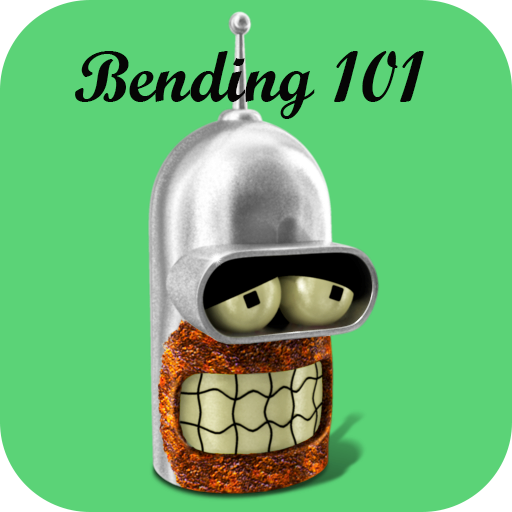
<style>
.page{position:relative;width:512px;height:512px;background:#5bd377}
.page>*{position:absolute;margin:0}
.t1{font:72px "ScriptMTBold";color:#060606}
</style>
<div class="page">
<p class="t1" style="left:75px;top:51px;width:349px;height:68px">Bending 101</p>
</div>
